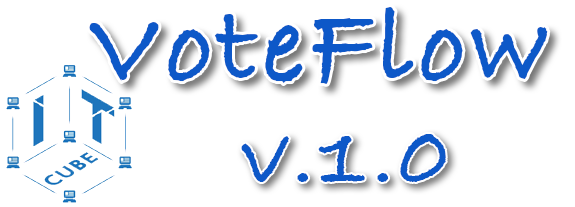
<style>
.page{position:relative;width:575px;height:207px;background:#ffffff}
.page>*{position:absolute;margin:0}
.t1{font:112.5px "BradleyHandITCTT-Bold";letter-spacing:0.04em;color:#0d58c8}
.t2{font:91.7px "BradleyHandITCTT-Bold";letter-spacing:0.04em;color:#0d58c8}
</style>
<div class="page">
<p class="t1" style="left:89px;top:7px;width:459px;height:77px">VoteFlow</p>
<p class="t2" style="left:241px;top:134px;width:205px;height:48px">v.1.0</p>
</div>
